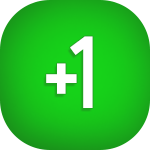
<style>
.page{position:relative;width:150px;height:150px}
.page>*{position:absolute;margin:0}
.t1{font:100px "Biko";color:#ffffff}
</style>
<div class="page">
<p class="t1" style="left:70px;top:36px;width:23px;height:72px">1</p>
<p class="t1" style="left:46px;top:63px;width:31px;height:31px">+</p>
</div>
